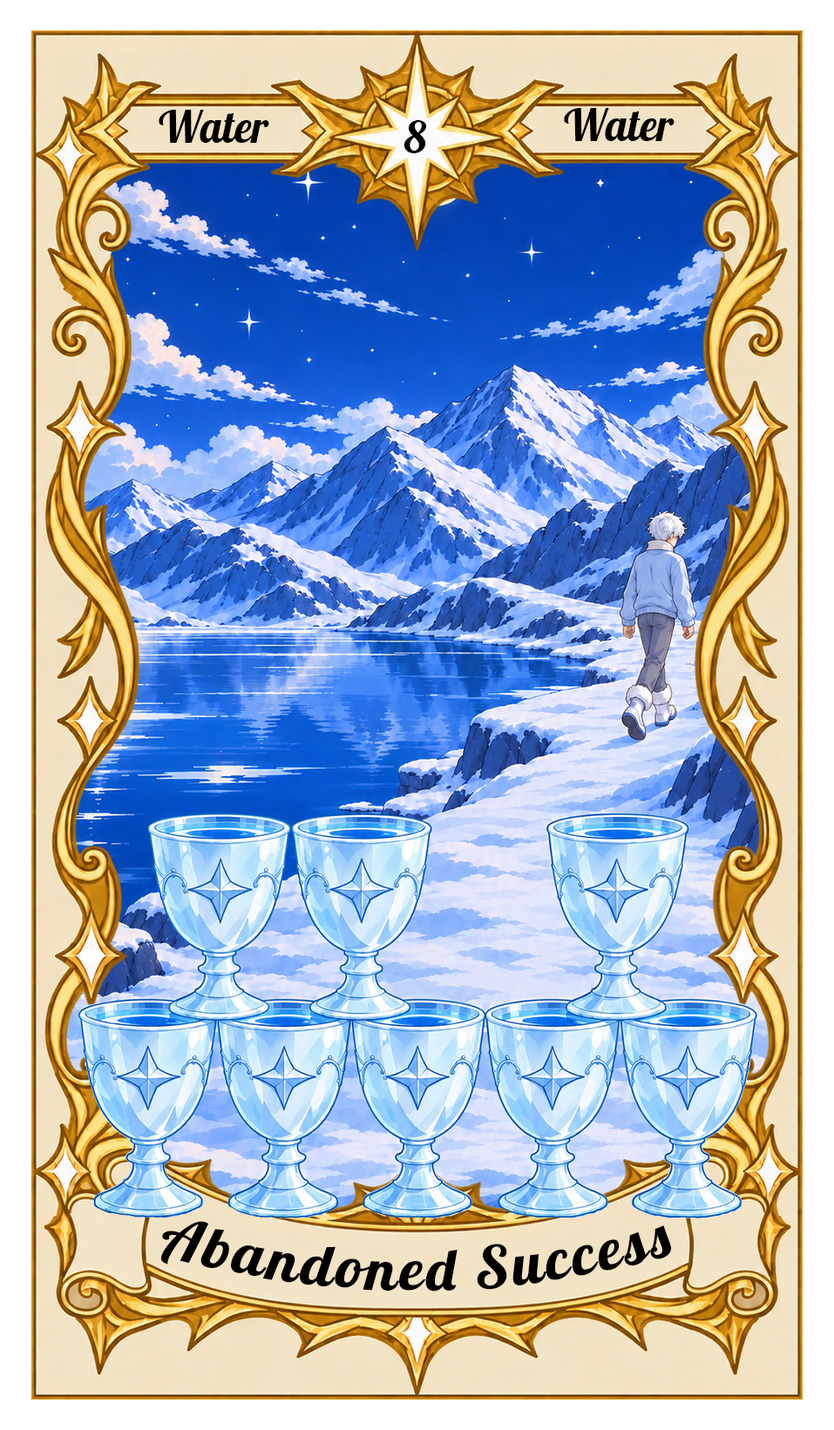
<style>
.page{position:relative;width:834px;height:1430px}
.page>*{position:absolute;margin:0}
.t1{font:43.6px "Lobster-Regular";color:#000000}
.t2{font:58.1px "Lobster-Regular";letter-spacing:0.05em;color:#000000}
</style>
<div class="page">
<p class="t1" style="left:159px;top:110px;width:110px;height:33px">Water</p>
<p class="t1" style="left:564px;top:108px;width:110px;height:33px">Water</p>
<p class="t1" style="left:403px;top:120px;width:24px;height:33px">8</p>
<p class="t2" style="left:160px;top:1221px;width:512px;height:71px">Abandoned Success</p>
</div>
